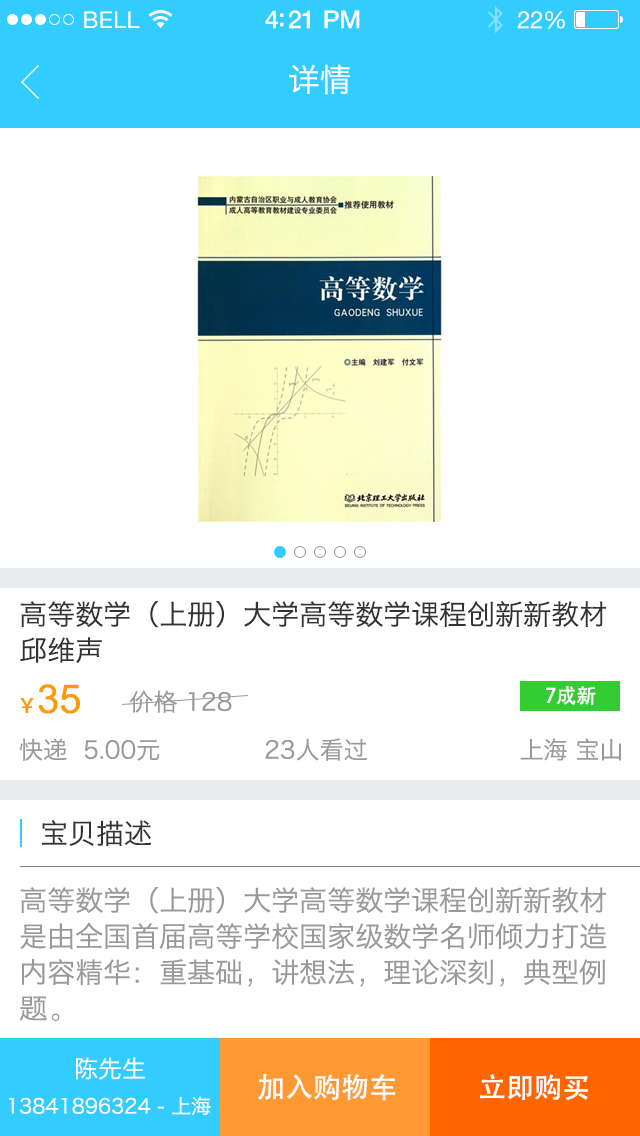
<style>
.page{position:relative;width:640px;height:1136px;background:#ffffff}
.page>*{position:absolute;margin:0}
.t1{font:23px "HelveticaNeue";letter-spacing:0.02em;color:#ffffff}
.t2{font:25px "HelveticaNeue-Medium";letter-spacing:-0.02em;color:#ffffff}
.t3{font:24px "HelveticaNeue";letter-spacing:-0.02em;color:#ffffff}
.t4{font:32px "MingHei_R";color:#ffffff}
.t5{font:28px/36px "MingHei_R";color:#333333}
.t6{font:40px "ArialMT";color:#ff9900}
.t7{font:20px "AdobeHeitiStd-Regular";color:#ff9900}
.t8{font:20px "AdobeHeitiStd-Regular";color:#ffffff}
.t9{font:24px "MingHei_R";color:#999999}
.t10{font:28px "MingHei_R";color:#333333}
.t11{font:28px/36px "MingHei_R";color:#999999}
.t12{font:24px "MingHei_R";color:#ffffff}
.t13{font:28px "AdobeHeitiStd-Regular";color:#ffffff}
.t14{font:20px "MingHei_R";color:#ffffff}
</style>
<div class="page">
<p class="t1" style="left:84px;top:11px;width:56px;height:17px">BELL</p>
<p class="t2" style="left:265px;top:10px;width:95px;height:19px">4:21 PM</p>
<p class="t3" style="left:517px;top:11px;width:48px;height:18px">22%</p>
<p class="t4" style="left:289px;top:64px;width:61px;height:31px">详情</p>
<p class="t5" style="left:20px;top:601px;width:586px;height:62px">高等数学（上册）大学高等数学课程创新新教材  <br>邱维声</p>
<p class="t6" style="left:20px;top:684px;width:60px;height:30px"><span class="t7">￥</span>35</p>
<p class="t8" style="left:546px;top:686px;width:50px;height:19px">7成新</p>
<p class="t9" style="left:129px;top:690px;width:103px;height:23px">价格 128</p>
<p class="t9" style="left:19px;top:738px;width:602px;height:23px">快递  5.00元             23人看过                   上海 宝山</p>
<p class="t10" style="left:42px;top:820px;width:110px;height:26px">宝贝描述</p>
<p class="t11" style="left:19px;top:887px;width:588px;height:134px">高等数学（上册）大学高等数学课程创新新教材  <br>是由全国首届高等学校国家级数学名师倾力打造<br>内容精华：重基础，讲想法，理论深刻，典型例<br>题。</p>
<p class="t12" style="left:75px;top:1057px;width:70px;height:23px">陈先生</p>
<p class="t13" style="left:258px;top:1073px;width:137px;height:28px">加入购物车</p>
<p class="t13" style="left:480px;top:1074px;width:108px;height:26px">立即购买</p>
<p class="t14" style="left:9px;top:1096px;width:202px;height:19px">13841896324 - 上海</p>
</div>
